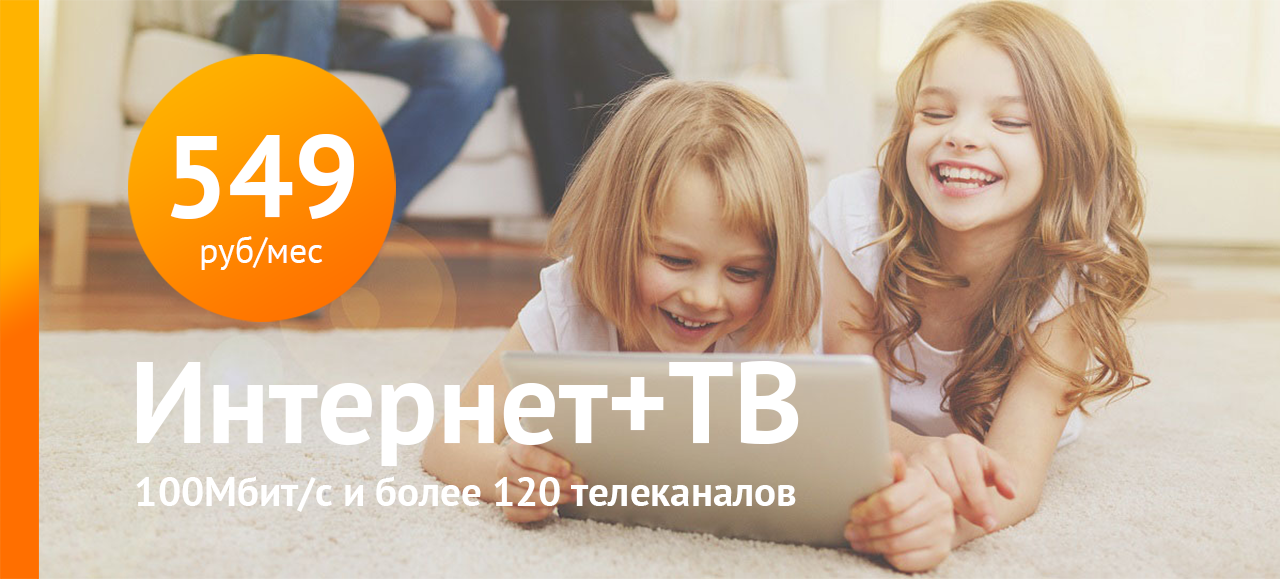
<style>
.page{position:relative;width:1280px;height:579px}
.page>*{position:absolute;margin:0}
.t1{font:115.7px "PTSans-Bold";color:#ffffff}
.t2{font:35.6px "PTSans-Regular";color:#ffffff}
.t3{font:41px "PTSans-Bold";color:#ffffff}
</style>
<div class="page">
<p class="t1" style="left:170px;top:134px;width:184px;height:85px">549</p>
<p class="t2" style="left:201px;top:236px;width:122px;height:34px">руб/мес</p>
<p class="t1" style="left:136px;top:361px;width:663px;height:105px">Интернет+ТВ</p>
<p class="t3" style="left:136px;top:476px;width:660px;height:36px">100Мбит/с и более 120 телеканалов</p>
</div>
